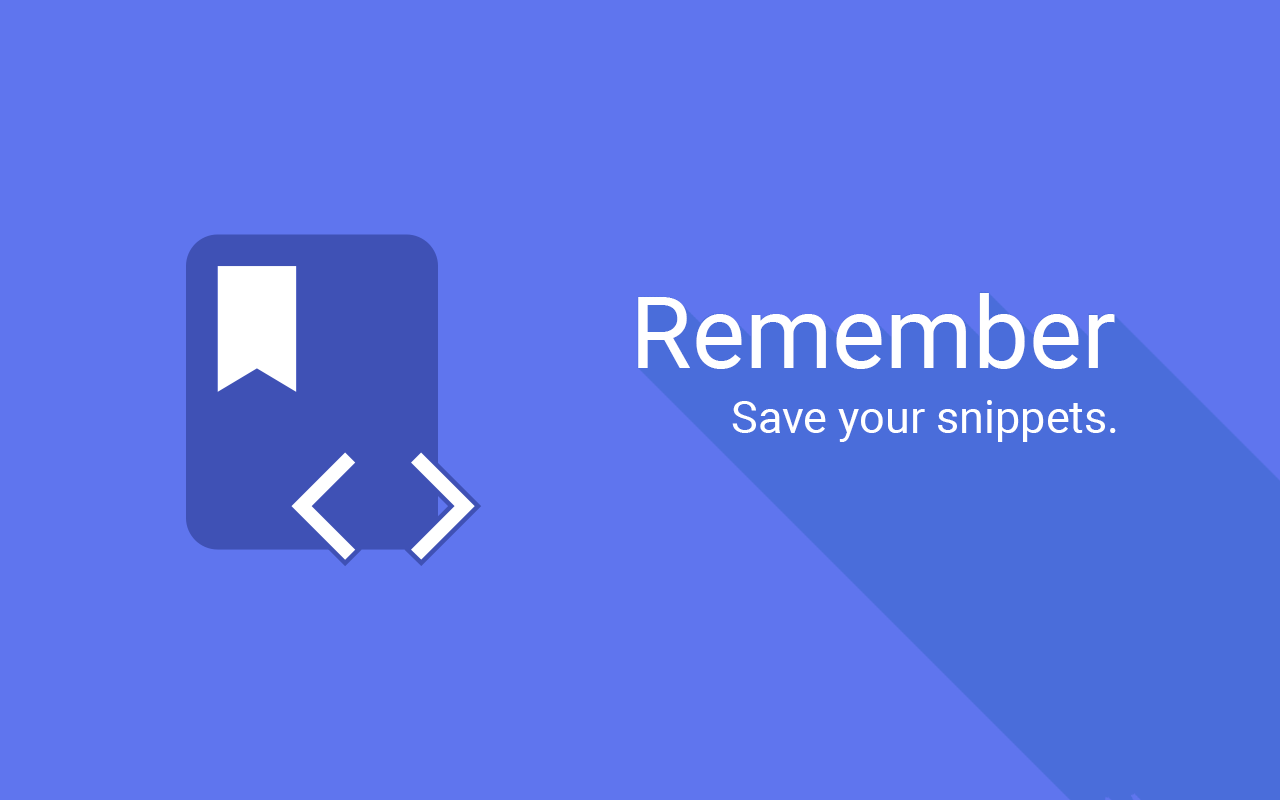
<style>
.page{position:relative;width:1280px;height:800px;background:#5f75ee}
.page>*{position:absolute;margin:0}
.t1{font:100px "Roboto-Regular";color:#ffffff}
.t2{font:45px "Roboto-Regular";color:#ffffff}
</style>
<div class="page">
<p class="t1" style="left:638px;top:293px;width:477px;height:76px">Remember</p>
<p class="t2" style="left:732px;top:400px;width:384px;height:42px">Save your snippets.</p>
</div>
